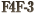
<style>
.page{position:relative;width:51px;height:13px;background:#ffffff}
.page>*{position:absolute;margin:0}
.t1{font:15px "RyuminPro-ExBold";letter-spacing:-0.06em;color:#4a3f32;font-weight:bold;scale:0.9 1}
</style>
<div class="page">
<p class="t1" style="left:1px;top:1px;width:33px;height:12px">F4F-3</p>
</div>
